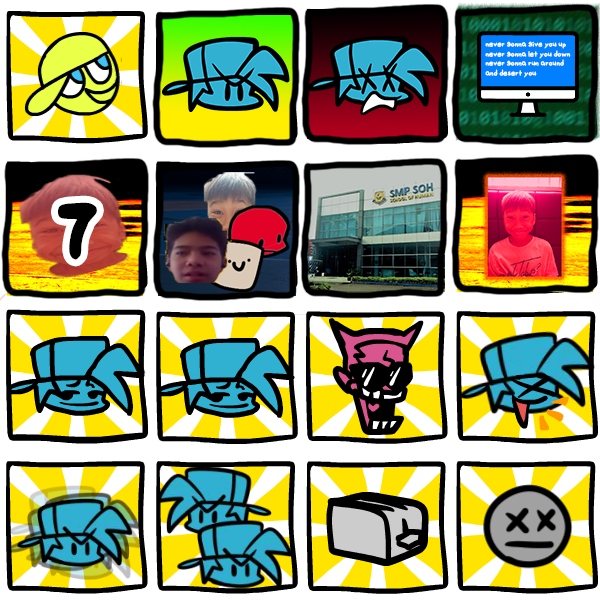
<style>
.page{position:relative;width:600px;height:600px;background:#ffffff}
.page>*{position:absolute;margin:0}
.t1{font:8px "FridayNightFunkin-Regular";color:#ffffff}
.t2{font:64px "FridayNightFunkin-Regular";color:#000000}
</style>
<div class="page">
<p class="t1" style="left:485px;top:41px;width:86px;height:37px">never gonna give you up<br>never gonna let you down<br>never gonna run around<br>and desert you</p>
<p class="t2" style="left:58px;top:202px;width:39px;height:58px">7</p>
</div>
